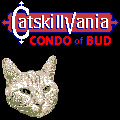
<style>
.page{position:relative;width:120px;height:120px;background:#000000}
.page>*{position:absolute;margin:0}
.t1{font:13.2px "Humanist521BT-XtraBoldCondensed";color:#ff0000}
.t2{font:9.7px "Humanist521BT-XtraBoldCondensed";letter-spacing:0.1em;color:#ff0000;scale:0.92 1}
</style>
<div class="page">
<p class="t1" style="left:30px;top:36px;width:41px;height:9px">CONDO</p>
<p class="t2" style="left:75px;top:37px;width:8px;height:7px">of</p>
<p class="t1" style="left:87px;top:36px;width:24px;height:9px">BUD</p>
</div>
